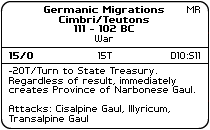
<style>
.page{position:relative;width:210px;height:130px;background:#ffffff}
.page>*{position:absolute;margin:0}
.t1{font:8px "PFTempestaSeven-Bold";color:#000000}
.t2{font:8px "PFTempestaSeven";color:#000000}
.t3{font:8px "PFTempestaSeven";color:#010101}
</style>
<div class="page">
<p class="t1" style="left:44px;top:6px;width:120px;height:26px;text-align:center">Germanic Migrations<br>Cimbri/Teutons<br>111 - 102 BC</p>
<p class="t2" style="left:187px;top:6px;width:13px;height:7px">MR</p>
<p class="t2" style="left:95px;top:35px;width:18px;height:7px">War</p>
<p class="t1" style="left:9px;top:52px;width:24px;height:7px">15/0</p>
<p class="t2" style="left:98px;top:52px;width:14px;height:7px">15T</p>
<p class="t3" style="left:171px;top:52px;width:29px;height:7px">D10:S11</p>
<p class="t2" style="left:9px;top:67px;width:186px;height:57px">-20T/Turn to State Treasury.<br>Regardless of result, immediately<br>creates Province of Narbonese Gaul.<br><br>Attacks: Cisalpine Gaul, Illyricum,<br>Transalpine Gaul</p>
</div>
